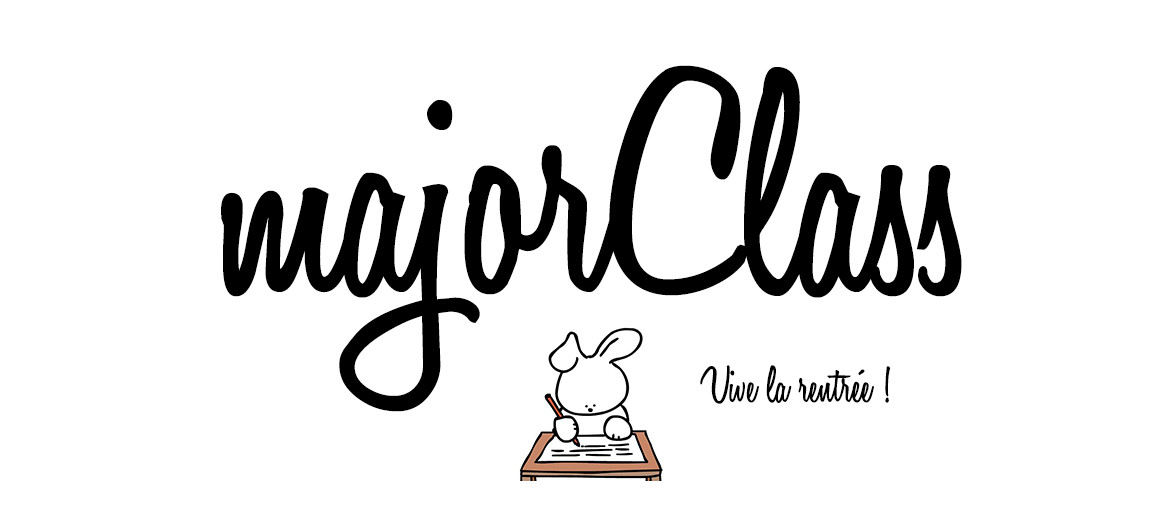
<style>
.page{position:relative;width:1150px;height:516px;background:#ffffff}
.page>*{position:absolute;margin:0}
.t1{font:330px "HoneyScript-SemiBold";color:#000000}
.t2{font:54px "HoneyScript-SemiBold";color:#000000}
</style>
<div class="page">
<p class="t1" style="left:220px;top:65px;width:742px;height:347px">majorClass</p>
<p class="t2" style="left:700px;top:365px;width:191px;height:39px">Vive la rentrée !</p>
</div>
